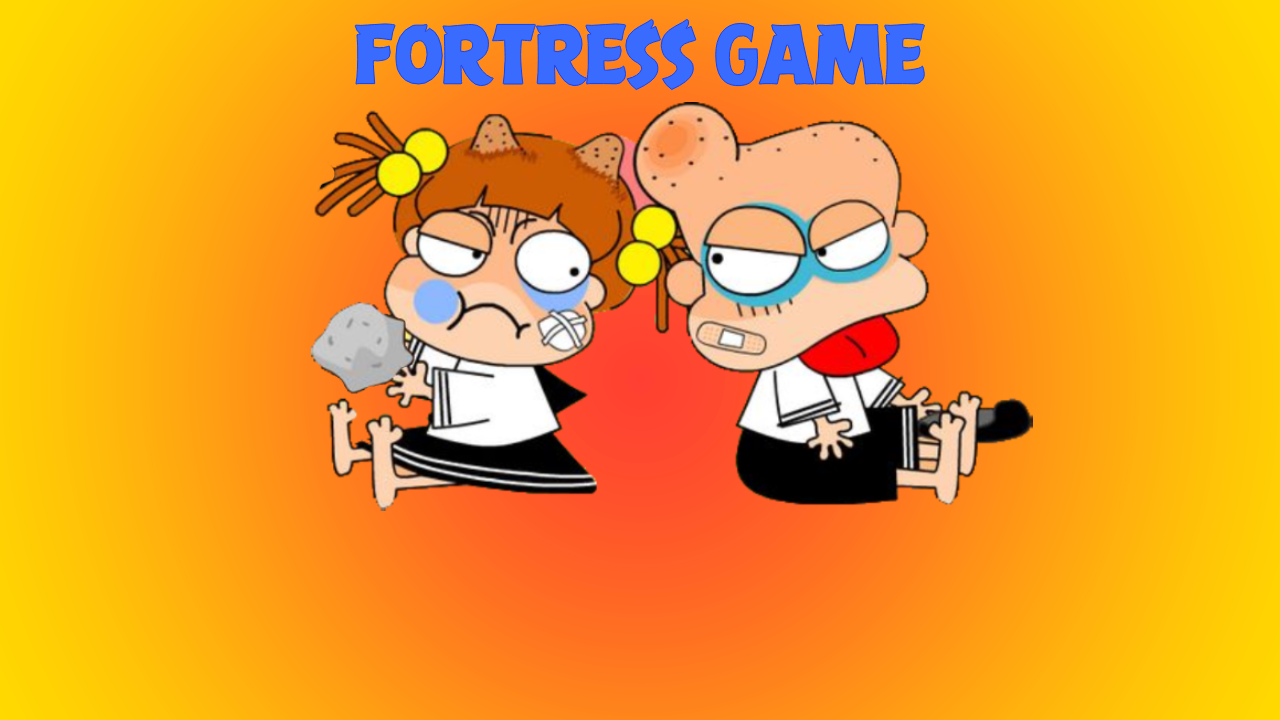
<style>
.page{position:relative;width:1280px;height:720px}
.page>*{position:absolute;margin:0}
.t1{font:71px "FS-Angry-Birds-Movie";color:#3a6bff}
</style>
<div class="page">
<p class="t1" style="left:354px;top:18px;width:572px;height:73px">FORTRESS GAME</p>
</div>
